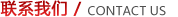
<style>
.page{position:relative;width:178px;height:17px;background:#ffffff}
.page>*{position:absolute;margin:0}
.t1{font:16px "MicrosoftYaHei";letter-spacing:0.03em;font-weight:bold}
.t2{font:16px "MicrosoftYaHei";letter-spacing:-0.07em;font-weight:bold}
.t3{font:12px "MicrosoftYaHei";letter-spacing:0.01em;color:#505050}
</style>
<div class="page">
<p class="t1" style="left:0px;top:0px;width:82px;height:17px">联系我们 <span class="t2">/</span></p>
<p class="t3" style="left:88px;top:6px;width:78px;height:10px">CONTACT US</p>
</div>
